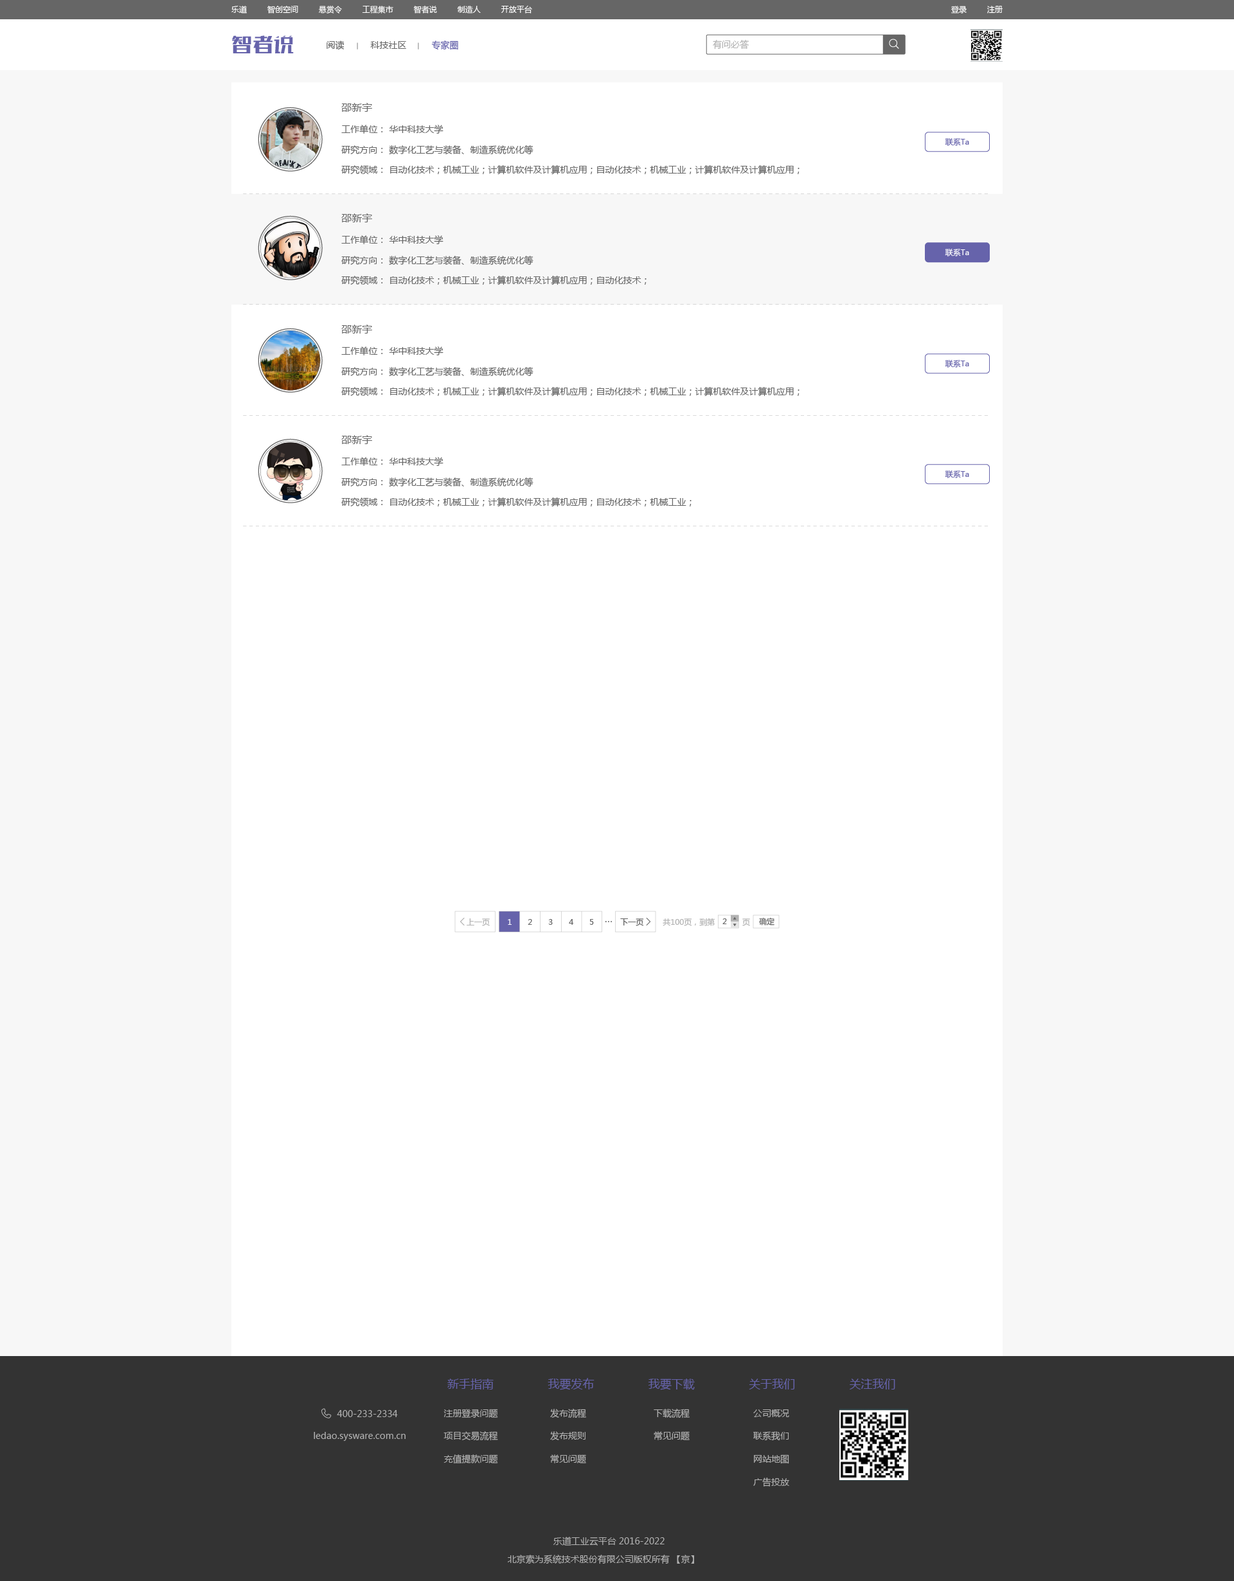
<style>
.page{position:relative;width:1234px;height:1581px;background:#ffffff}
.page>*{position:absolute;margin:0}
.t1{font:7.7px "MicrosoftYaHei";color:#ffffff}
.t2{font:19.3px "FZSKJW--GB1-0";color:#6663ab;scale:1.08 1}
.t3{font:9px "MicrosoftYaHei";color:#666666}
.t4{font:9px "MicrosoftYaHei";color:#6663ab}
.t5{font:9px "MicrosoftYaHei";color:#b2b2b2}
.t6{font:10.3px "MicrosoftYaHei";color:#666666}
.t7{font:7.7px "MicrosoftYaHei";color:#6663ab}
.t8{font:7.7px "MicrosoftYaHei";color:#666666}
.t9{font:7.7px "MicrosoftYaHei";color:#b2b2b2}
.t10{font:11.6px "MicrosoftYaHei";color:#6663ab}
</style>
<div class="page">
<p class="t1" style="left:231px;top:5px;width:301px;height:9px">乐道         智创空间         悬赏令         工程集市         智者说         制造人         开放平台</p>
<p class="t1" style="left:951px;top:6px;width:52px;height:8px">登录         注册</p>
<p class="t2" style="left:232px;top:35px;width:62px;height:18px">智者说</p>
<p class="t3" style="left:327px;top:40px;width:18px;height:10px">阅读</p>
<p class="t3" style="left:370px;top:41px;width:36px;height:8px">科技社区</p>
<p class="t4" style="left:431px;top:40px;width:27px;height:10px">专家圈</p>
<p class="t5" style="left:713px;top:40px;width:36px;height:10px">有问必答</p>
<p class="t6" style="left:341px;top:103px;width:31px;height:9px">邵新宇</p>
<p class="t3" style="left:341px;top:125px;width:103px;height:9px">工作单位： 华中科技大学</p>
<p class="t3" style="left:341px;top:145px;width:193px;height:10px">研究方向： 数字化工艺与装备、制造系统优化等</p>
<p class="t7" style="left:945px;top:138px;width:24px;height:8px">联系Ta</p>
<p class="t3" style="left:341px;top:165px;width:459px;height:10px">研究领域： 自动化技术；机械工业；计算机软件及计算机应用；自动化技术；机械工业；计算机软件及计算机应用；</p>
<p class="t6" style="left:341px;top:213px;width:31px;height:9px">邵新宇</p>
<p class="t3" style="left:341px;top:235px;width:103px;height:9px">工作单位： 华中科技大学</p>
<p class="t3" style="left:341px;top:256px;width:193px;height:10px">研究方向： 数字化工艺与装备、制造系统优化等</p>
<p class="t1" style="left:945px;top:249px;width:24px;height:7px">联系Ta</p>
<p class="t3" style="left:341px;top:276px;width:306px;height:9px">研究领域： 自动化技术；机械工业；计算机软件及计算机应用；自动化技术；</p>
<p class="t6" style="left:341px;top:325px;width:31px;height:9px">邵新宇</p>
<p class="t3" style="left:341px;top:346px;width:103px;height:10px">工作单位： 华中科技大学</p>
<p class="t7" style="left:945px;top:360px;width:24px;height:8px">联系Ta</p>
<p class="t3" style="left:341px;top:367px;width:193px;height:10px">研究方向： 数字化工艺与装备、制造系统优化等</p>
<p class="t3" style="left:341px;top:387px;width:459px;height:10px">研究领域： 自动化技术；机械工业；计算机软件及计算机应用；自动化技术；机械工业；计算机软件及计算机应用；</p>
<p class="t6" style="left:341px;top:435px;width:31px;height:9px">邵新宇</p>
<p class="t3" style="left:341px;top:457px;width:103px;height:9px">工作单位： 华中科技大学</p>
<p class="t7" style="left:945px;top:471px;width:24px;height:7px">联系Ta</p>
<p class="t3" style="left:341px;top:478px;width:193px;height:9px">研究方向： 数字化工艺与装备、制造系统优化等</p>
<p class="t3" style="left:341px;top:498px;width:351px;height:9px">研究领域： 自动化技术；机械工业；计算机软件及计算机应用；自动化技术；机械工业；</p>
<p class="t8" style="left:759px;top:917px;width:16px;height:9px">确定</p>
<p class="t9" style="left:467px;top:919px;width:23px;height:7px">上一页</p>
<p class="t1" style="left:508px;top:919px;width:4px;height:6px">1</p>
<p class="t8" style="left:528px;top:919px;width:4px;height:6px">2</p>
<p class="t8" style="left:548px;top:919px;width:5px;height:6px">3</p>
<p class="t8" style="left:569px;top:919px;width:4px;height:6px">4</p>
<p class="t8" style="left:590px;top:919px;width:4px;height:6px">5</p>
<p class="t8" style="left:620px;top:919px;width:24px;height:7px">下一页</p>
<p class="t9" style="left:663px;top:918px;width:87px;height:8px">共100页，到第            页</p>
<p class="t8" style="left:723px;top:919px;width:4px;height:5px">2</p>
<p class="t10" style="left:447px;top:1379px;width:47px;height:11px">新手指南</p>
<p class="t10" style="left:548px;top:1378px;width:47px;height:12px">我要发布</p>
<p class="t10" style="left:648px;top:1379px;width:47px;height:11px">我要下载</p>
<p class="t10" style="left:749px;top:1379px;width:46px;height:11px">关于我们</p>
<p class="t10" style="left:849px;top:1379px;width:47px;height:11px">关注我们</p>
<p class="t5" style="left:444px;top:1409px;width:54px;height:9px">注册登录问题</p>
<p class="t5" style="left:550px;top:1409px;width:36px;height:10px">发布流程</p>
<p class="t5" style="left:654px;top:1409px;width:36px;height:10px">下载流程</p>
<p class="t5" style="left:753px;top:1410px;width:36px;height:8px">公司概况</p>
<p class="t5" style="left:337px;top:1410px;width:61px;height:8px">400-233-2334</p>
<p class="t5" style="left:314px;top:1432px;width:92px;height:9px">ledao.sysware.com.cn</p>
<p class="t5" style="left:444px;top:1432px;width:54px;height:9px">项目交易流程</p>
<p class="t5" style="left:550px;top:1432px;width:36px;height:9px">发布规则</p>
<p class="t5" style="left:654px;top:1432px;width:36px;height:9px">常见问题</p>
<p class="t5" style="left:753px;top:1432px;width:36px;height:9px">联系我们</p>
<p class="t5" style="left:444px;top:1455px;width:54px;height:9px">充值提款问题</p>
<p class="t5" style="left:550px;top:1455px;width:36px;height:9px">常见问题</p>
<p class="t5" style="left:754px;top:1455px;width:35px;height:9px">网站地图</p>
<p class="t5" style="left:753px;top:1478px;width:36px;height:9px">广告投放</p>
<p class="t5" style="left:554px;top:1537px;width:111px;height:9px">乐道工业云平台 2016-2022</p>
<p class="t5" style="left:508px;top:1555px;width:186px;height:10px">北京索为系统技术股份有限公司版权所有 【京】</p>
</div>
